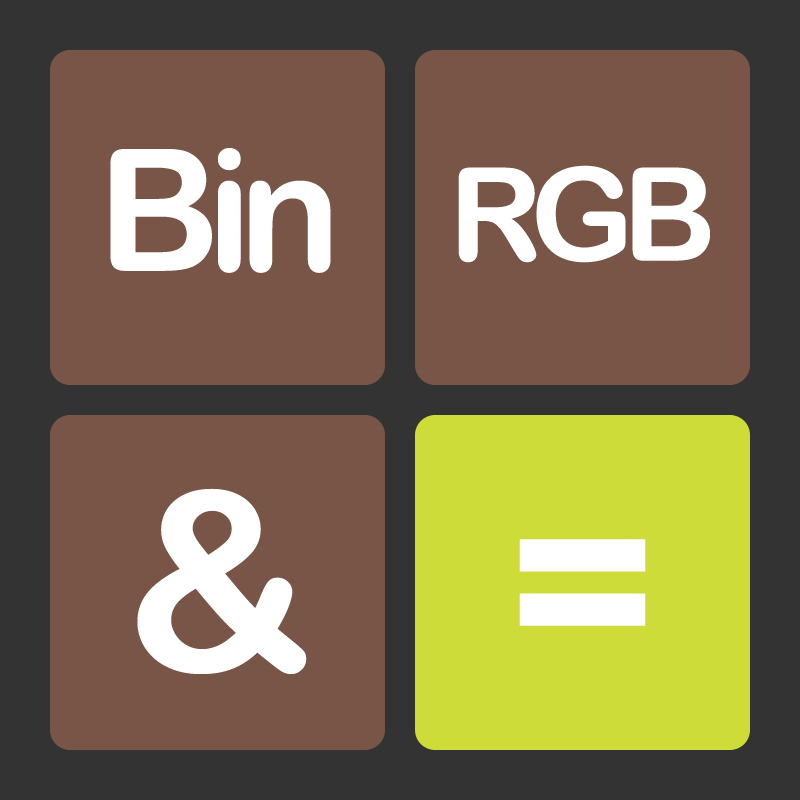
<style>
.page{position:relative;width:800px;height:800px;background:#795548}
.page>*{position:absolute;margin:0}
.t1{font:170px "ArialRoundedMTBold";letter-spacing:-0.08em;color:#ffffff}
.t2{font:130px "ArialRoundedMTBold";letter-spacing:-0.08em;color:#ffffff}
.t3{font:250px "ArialRoundedMTBold";letter-spacing:0.3em;color:#ffffff}
</style>
<div class="page">
<p class="t1" style="left:110px;top:148px;width:221px;height:125px">Bin</p>
<p class="t2" style="left:458px;top:165px;width:252px;height:98px">RGB</p>
<p class="t3" style="left:137px;top:488px;width:170px;height:186px">&amp;</p>
<p class="t3" style="left:519px;top:539px;width:127px;height:87px">=</p>
</div>
